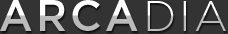
<style>
.page{position:relative;width:228px;height:34px;background:#333333}
.page>*{position:absolute;margin:0}
.t1{font:43px "Gotham-Medium";letter-spacing:0.075em;text-transform:uppercase}
.t2{font:43px "Gotham-Light";letter-spacing:0.075em;text-transform:uppercase}
</style>
<div class="page">
<p class="t1" style="left:0px;top:0px;width:226px;height:31px">Arca<span class="t2">dia</span></p>
</div>
